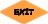
<style>
.page{position:relative;width:48px;height:24px;background:#ffffff}
.page>*{position:absolute;margin:0}
.t1{font:9px "Croobie";color:#000000}
</style>
<div class="page">
<p class="t1" style="left:14px;top:8px;width:20px;height:8px">EXIT</p>
</div>
